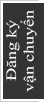
<style>
.page{position:relative;width:44px;height:102px;background:#333333}
.page>*{position:absolute;margin:0}
.t1{font:14.5px "TimesNewRomanPSMT";color:#ffffff;scale:1.24 1}
</style>
<div class="page">
<p class="t1" style="left:6px;top:10px;width:31px;height:82px;text-align:center;rotate:-90deg">Đăng ký<br>vận chuyển</p>
</div>
